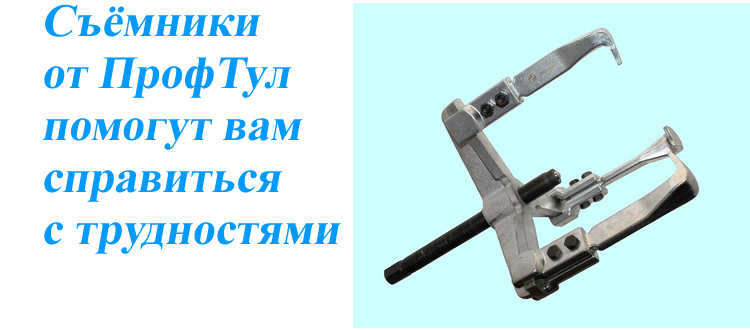
<style>
.page{position:relative;width:750px;height:330px;background:#ffffff}
.page>*{position:absolute;margin:0}
.t1{font:46px/52px "TimesNewRomanPS-BoldMT";color:#0099ff;font-style:italic}
</style>
<div class="page">
<p class="t1" style="left:42px;top:4px;width:299px;height:250px;text-align:justify">Съёмники<br>от ПрофТул<br>помогут вам<br>справиться<br>с трудностями</p>
</div>
